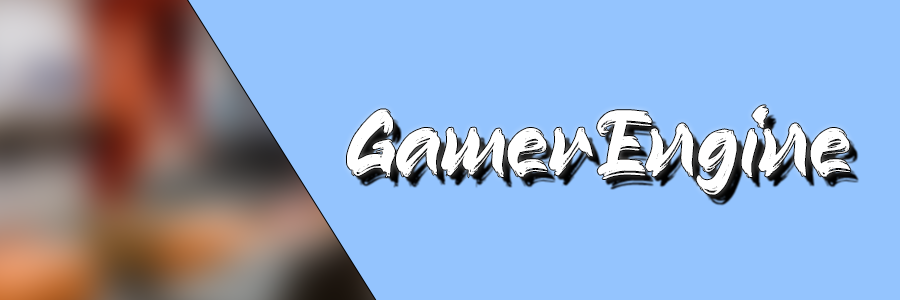
<style>
.page{position:relative;width:900px;height:300px;background:#94c4fe}
.page>*{position:absolute;margin:0}
.t1{font:95px "aAlwaysSmile";color:#ffffff}
</style>
<div class="page">
<p class="t1" style="left:347px;top:105px;width:504px;height:90px">GamerEngine</p>
</div>
